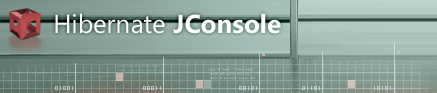
<style>
.page{position:relative;width:437px;height:93px}
.page>*{position:absolute;margin:0}
.t1{font:26px "SegoeUI";color:#ffffff}
.t2{font:26px "SegoeUI-Bold";color:#ffffff}
</style>
<div class="page">
<p class="t1" style="left:55px;top:13px;width:226px;height:21px">Hibernate <span class="t2">JConsole</span></p>
</div>
